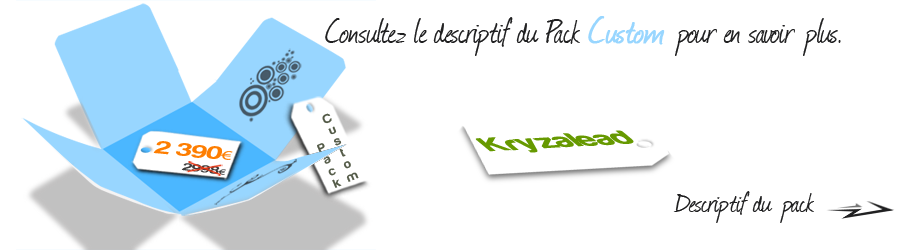
<style>
.page{position:relative;width:900px;height:250px;background:#ffffff}
.page>*{position:absolute;margin:0}
.t1{font:40px "Journal";color:#202021;scale:0.9 1}
.t2{font:42px "Journal";color:#98d6ff;font-weight:bold;scale:0.9 1}
.t3{font:29.4px "Harabara";color:#669900;font-weight:bold;scale:1.19 1}
.t4{font:19px "Harabara";color:#fe7e01;scale:1.56 1}
.t5{font:13.5px "MyriadPro-Regular";color:#fe7e01;scale:1.56 1}
.t6{font:10.9px "Harabara";scale:1.64 1}
.t7{font:8px "MyriadPro-Regular";scale:1.64 1}
.t8{font:32px "Journal";color:#202021}
</style>
<div class="page">
<p class="t1" style="left:325px;top:16px;width:516px;height:40px">Consultez le descriptif du Pack <span class="t2">Custom</span> pour en savoir plus.</p>
<p class="t3" style="left:475px;top:130px;width:159px;height:23px;rotate:-3deg">Kryzalead</p>
<p class="t4" style="left:153px;top:141px;width:80px;height:19px;rotate:5deg">2 390<span class="t5">€</span></p>
<p class="t6" style="left:181px;top:163px;width:45px;height:12px;rotate:7deg">2998<span class="t7">€</span></p>
<p class="t8" style="left:673px;top:191px;width:141px;height:32px">Descriptif du pack</p>
</div>
